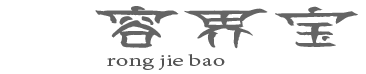
<style>
.page{position:relative;width:366px;height:74px;background:#ffffff}
.page>*{position:absolute;margin:0}
.t1{font:60px "HYf5gj";color:#535353;scale:1.5 1}
.t2{font:18px "AdobeDevanagari-Regular";color:#535353;scale:1.5 1}
</style>
<div class="page">
<p class="t1" style="left:95px;top:6px;width:263px;height:43px;opacity:0.9">容界宝</p>
<p class="t2" style="left:107px;top:54px;width:118px;height:16px">rong jie bao</p>
</div>
